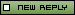
<style>
.page{position:relative;width:75px;height:15px;background:#000000}
.page>*{position:absolute;margin:0}
.t1{font:8px "BitDustTwo";color:#000000}
</style>
<div class="page">
<p class="t1" style="left:18px;top:5px;width:49px;height:5px">NEW REPLY</p>
</div>
